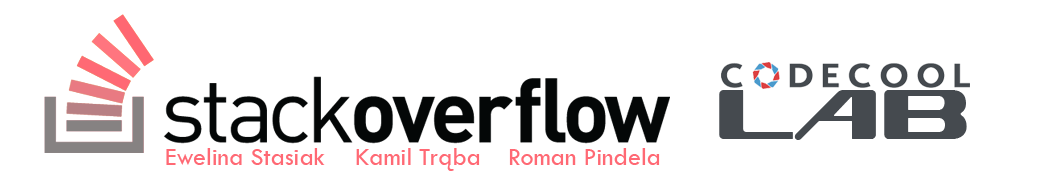
<style>
.page{position:relative;width:1041px;height:194px;background:#ffffff}
.page>*{position:absolute;margin:0}
.t1{font:68.7px "Superglue-Regular";color:#454a4f}
.t2{font:26px "TwCenMT-Regular";color:#ff6974}
</style>
<div class="page">
<p class="t1" style="left:719px;top:90px;width:248px;height:50px">LAB</p>
<p class="t2" style="left:166px;top:148px;width:159px;height:17px">Ewelina Stasiak</p>
<p class="t2" style="left:356px;top:148px;width:124px;height:23px">Kamil Trąba</p>
<p class="t2" style="left:509px;top:148px;width:151px;height:17px">Roman Pindela</p>
</div>
